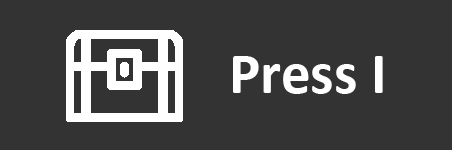
<style>
.page{position:relative;width:452px;height:150px;background:#333333}
.page>*{position:absolute;margin:0}
.t1{font:59px "Calibri-Bold";color:#ffffff}
</style>
<div class="page">
<p class="t1" style="left:233px;top:56px;width:150px;height:38px">Press I</p>
</div>
